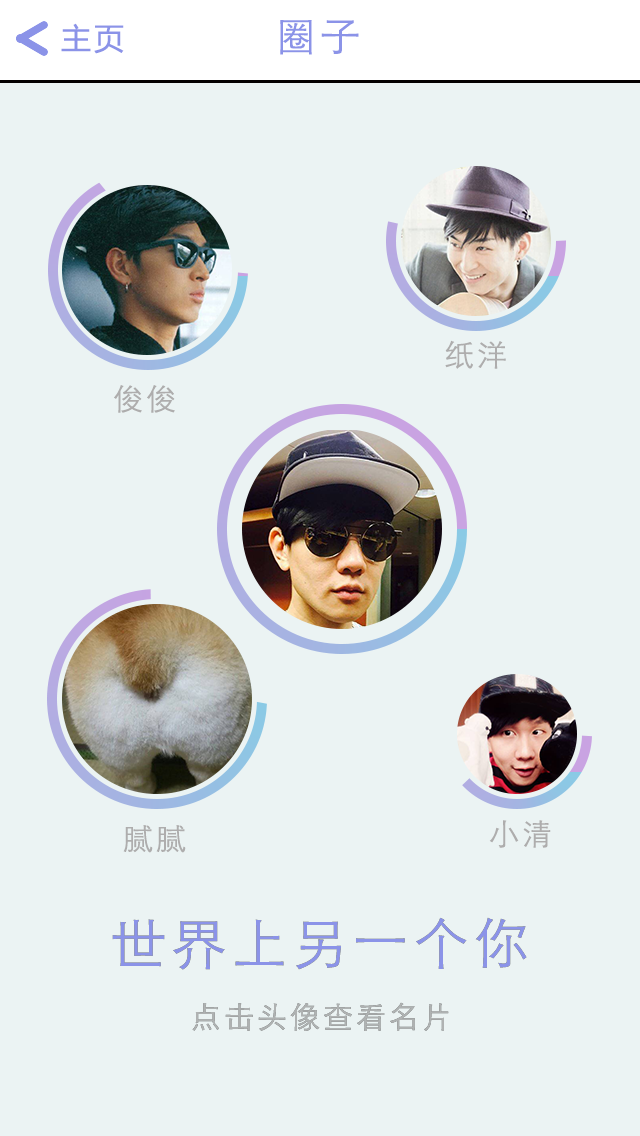
<style>
.page{position:relative;width:640px;height:1136px;background:#ebf3f3}
.page>*{position:absolute;margin:0}
.t1{font:30px "MicrosoftYaHei";letter-spacing:0.1em;color:#8b93e8}
.t2{font:40px "STXihei";letter-spacing:0.1em;color:#8b93e8}
.t3{font:30px "STXihei";letter-spacing:0.1em;color:#aeadad}
.t4{font:55px "STXihei";letter-spacing:0.1em;color:#8b93e8}
.t5{font:30px "STXihei";letter-spacing:0.1em;color:#afb2b2}
</style>
<div class="page">
<p class="t1" style="left:61px;top:23px;width:63px;height:31px">主页</p>
<p class="t2" style="left:280px;top:20px;width:79px;height:35px">圈子</p>
<p class="t3" style="left:445px;top:340px;width:61px;height:29px">纸洋</p>
<p class="t3" style="left:114px;top:385px;width:61px;height:28px">俊俊</p>
<p class="t3" style="left:489px;top:820px;width:62px;height:28px">小清</p>
<p class="t3" style="left:123px;top:825px;width:63px;height:28px">腻腻</p>
<p class="t4" style="left:112px;top:917px;width:415px;height:53px">世界上另一个你</p>
<p class="t5" style="left:192px;top:1002px;width:257px;height:29px">点击头像查看名片</p>
</div>
